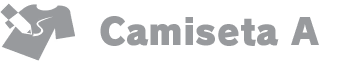
<style>
.page{position:relative;width:352px;height:64px;background:#ffffff}
.page>*{position:absolute;margin:0}
.t1{font:36px "RodinPro-UB";color:#989a9d}
</style>
<div class="page">
<p class="t1" style="left:100px;top:16px;width:219px;height:30px">Camiseta A</p>
</div>
